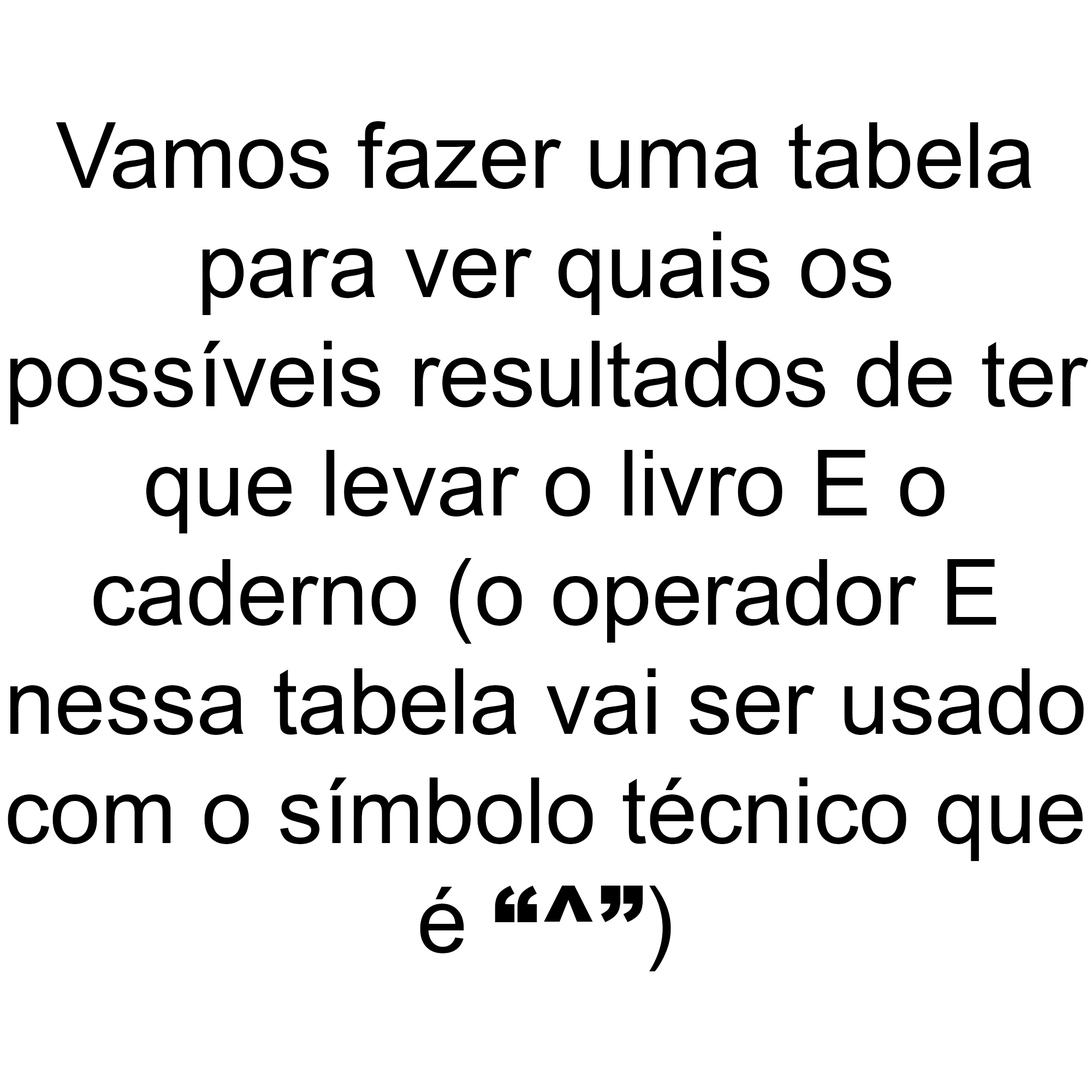
<style>
.page{position:relative;width:1092px;height:1092px;background:#ffffff}
.page>*{position:absolute;margin:0}
.t1{font:91px "ArialMT";color:#000000}
.t2{font:91px "Arial-Black";color:#000000}
</style>
<div class="page">
<p class="t1" style="left:8px;top:121px;width:1080px;height:850px;text-align:center">Vamos fazer uma tabela<br>para ver quais os<br>possíveis resultados de ter<br>que levar o livro E o<br>caderno (o operador E<br>nessa tabela vai ser usado<br>com o símbolo técnico que<br>é <span class="t2">“^”</span>)</p>
</div>
